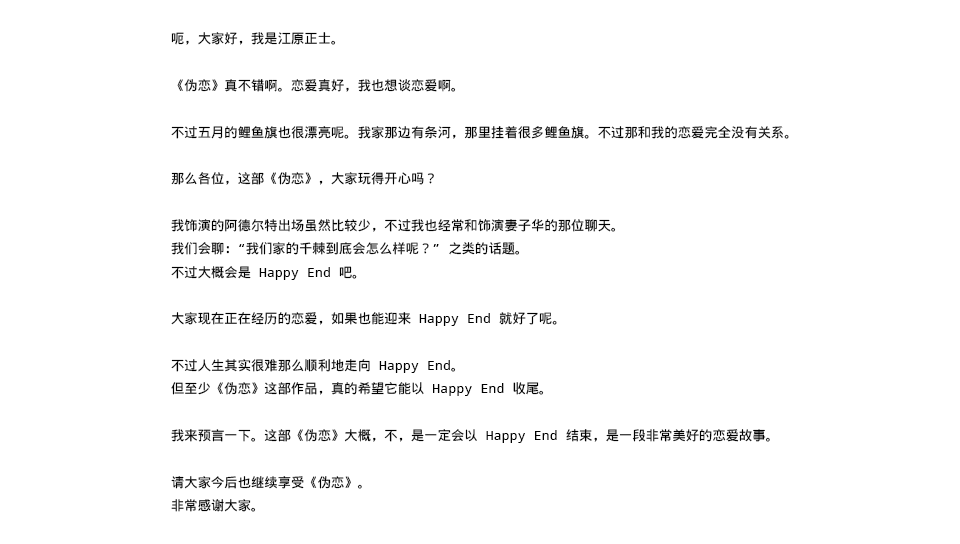
<style>
.page{position:relative;width:960px;height:544px;background:#ffffff}
.page>*{position:absolute;margin:0}
.t1{font:13.3px "WenQuanYiMicroHeiMono";color:#000000}
</style>
<div class="page">
<p class="t1" style="left:171px;top:32px;width:618px;height:480px">呃，大家好，我是江原正士。<br><br>《伪恋》真不错啊。恋爱真好，我也想谈恋爱啊。<br><br>不过五月的鲤鱼旗也很漂亮呢。我家那边有条河，那里挂着很多鲤鱼旗。不过那和我的恋爱完全没有关系。<br><br>那么各位，这部《伪恋》，大家玩得开心吗？<br><br>我饰演的阿德尔特出场虽然比较少，不过我也经常和饰演妻子华的那位聊天。<br>我们会聊：“我们家的千棘到底会怎么样呢？” 之类的话题。<br>不过大概会是 Happy End 吧。<br><br>大家现在正在经历的恋爱，如果也能迎来 Happy End 就好了呢。<br><br>不过人生其实很难那么顺利地走向 Happy End。<br>但至少《伪恋》这部作品，真的希望它能以 Happy End 收尾。<br><br>我来预言一下。这部《伪恋》大概，不，是一定会以 Happy End 结束，是一段非常美好的恋爱故事。<br><br>请大家今后也继续享受《伪恋》。<br>非常感谢大家。</p>
</div>
